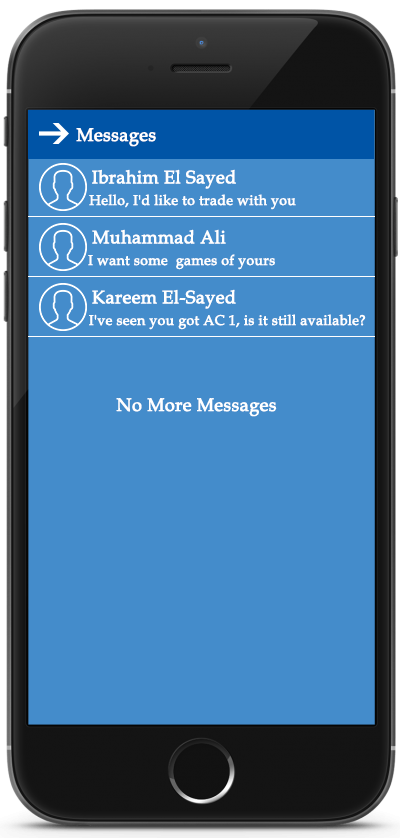
<style>
.page{position:relative;width:400px;height:838px;background:#448ccb}
.page>*{position:absolute;margin:0}
.t1{font:18px "BookAntiqua";color:#ffffff;font-weight:bold}
.t2{font:14px "BookAntiqua";color:#ffffff;font-weight:bold}
</style>
<div class="page">
<p class="t1" style="left:76px;top:128px;width:80px;height:19px">Messages</p>
<p class="t1" style="left:92px;top:169px;width:144px;height:20px">Ibrahim El Sayed</p>
<p class="t2" style="left:89px;top:194px;width:207px;height:16px">Hello, I'd like to trade with you</p>
<p class="t1" style="left:92px;top:229px;width:134px;height:15px">Muhammad Ali</p>
<p class="t2" style="left:88px;top:254px;width:187px;height:16px">I want some  games of yours</p>
<p class="t1" style="left:92px;top:289px;width:144px;height:20px">Kareem El-Sayed</p>
<p class="t2" style="left:89px;top:314px;width:277px;height:16px">I've seen you got AC 1, is it still available?</p>
<p class="t1" style="left:116px;top:398px;width:161px;height:19px">No More Messages</p>
</div>
